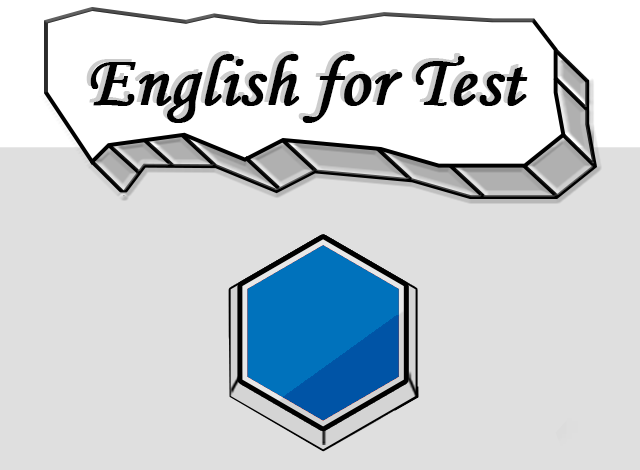
<style>
.page{position:relative;width:640px;height:470px;background:#dfdfdf}
.page>*{position:absolute;margin:0}
.t1{font:72px "MonotypeCorsiva";color:#010101;font-weight:bold}
</style>
<div class="page">
<p class="t1" style="left:90px;top:54px;width:438px;height:69px">English for Test</p>
</div>
